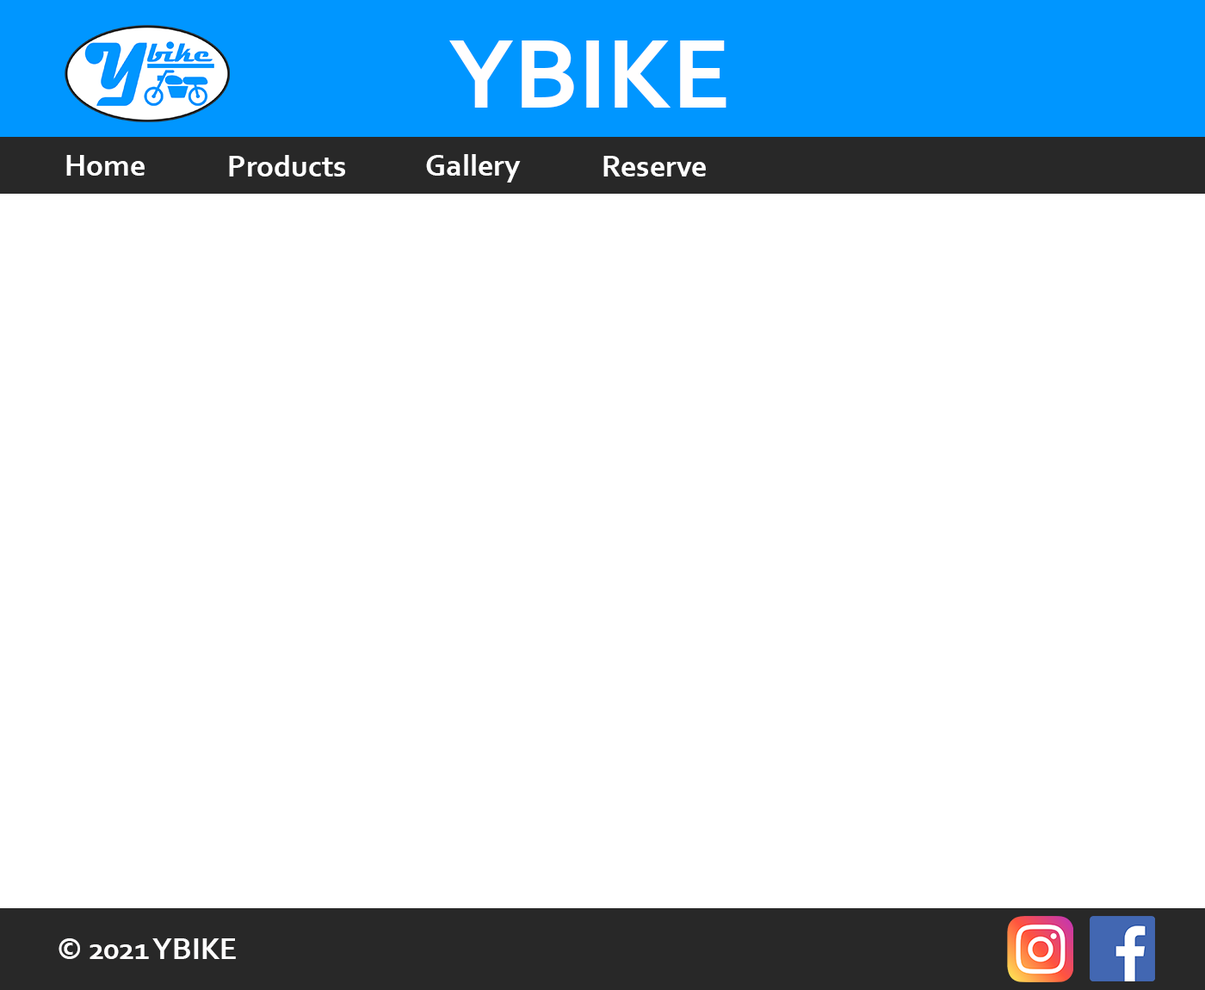
<style>
.page{position:relative;width:1205px;height:990px;background:#ffffff}
.page>*{position:absolute;margin:0}
.t1{font:103.3px "Corbel-Bold";color:#fffefe}
.t2{font:31px "Corbel-Bold";color:#ffffff}
.t3{font:31px "Corbel-Bold";color:#fffefe}
</style>
<div class="page">
<p class="t1" style="left:449px;top:40px;width:277px;height:68px">YBIKE</p>
<p class="t2" style="left:66px;top:155px;width:79px;height:21px">Home</p>
<p class="t2" style="left:229px;top:155px;width:116px;height:21px">Products</p>
<p class="t2" style="left:426px;top:154px;width:95px;height:28px">Gallery</p>
<p class="t2" style="left:603px;top:156px;width:103px;height:20px">Reserve</p>
<p class="t3" style="left:59px;top:938px;width:177px;height:21px">© 2021 YBIKE</p>
</div>
